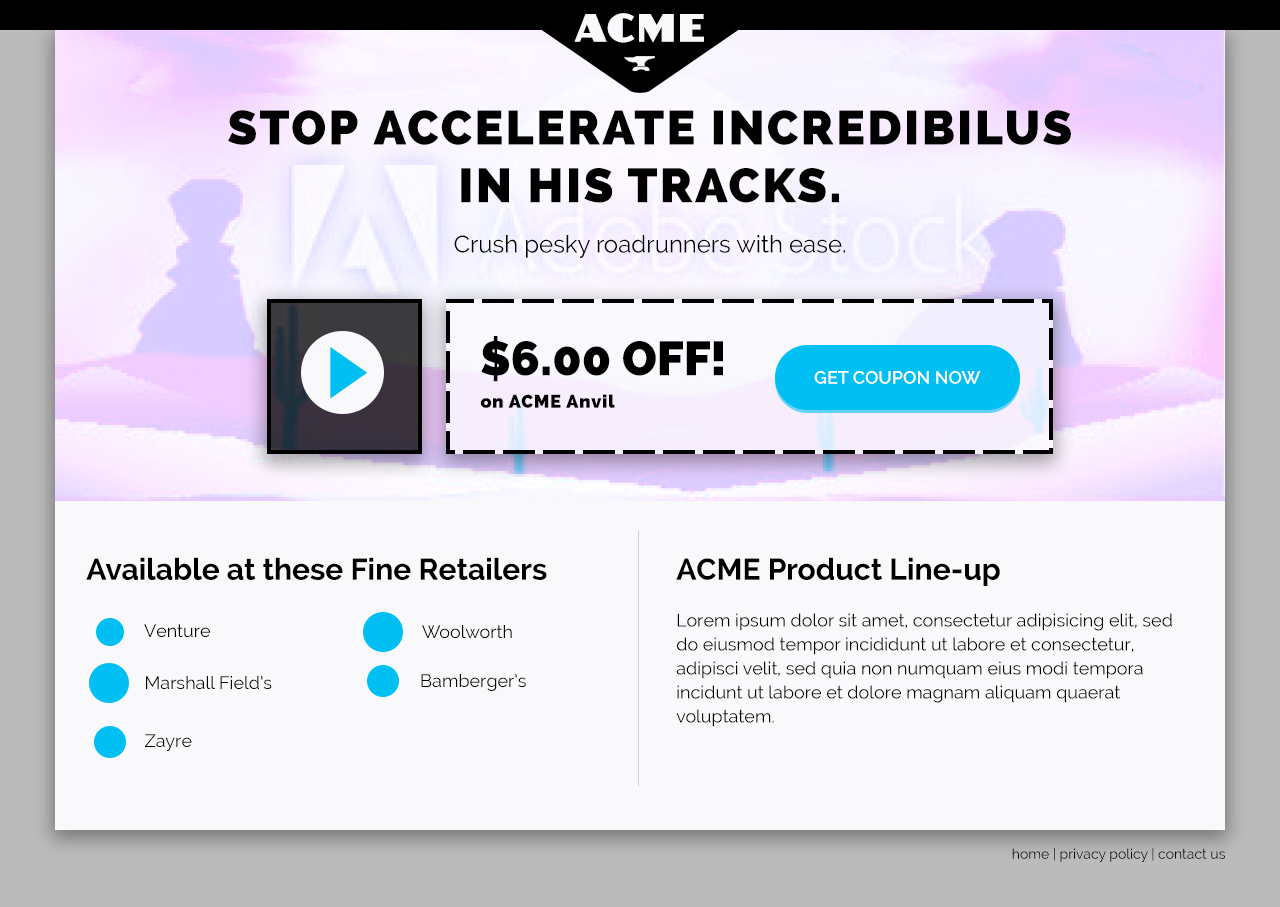
<style>
.page{position:relative;width:1280px;height:907px;background:#f9f9fc}
.page>*{position:absolute;margin:0}
.t1{font:37px "AnchorJack";letter-spacing:0.05em;color:#f9f9fc}
.t2{font:48px "Raleway-Heavy";letter-spacing:0.05em;color:#010101;text-transform:uppercase}
.t3{font:24px "Raleway";color:#000000}
.t4{font:48px "Raleway-Heavy";color:#000000}
.t5{font:18px "Raleway-SemiBold";color:#ffffff;text-transform:uppercase}
.t6{font:18px "Raleway-Heavy";letter-spacing:0.05em;color:#000000}
.t7{font:30px "Raleway-Bold";color:#000000}
.t8{font:18px/24px "Raleway";color:#000000}
.t9{font:18px "Raleway";color:#000000}
.t10{font:14px "Raleway";color:#010101}
</style>
<div class="page">
<p class="t1" style="left:574px;top:13px;width:130px;height:30px">ACME</p>
<p class="t2" style="left:228px;top:110px;width:843px;height:93px;text-align:center">Stop Accelerate Incredibilus in his Tracks.</p>
<p class="t3" style="left:454px;top:235px;width:391px;height:23px">Crush pesky roadrunners with ease.</p>
<p class="t4" style="left:481px;top:336px;width:242px;height:46px">$6.00 OFF!</p>
<p class="t5" style="left:814px;top:371px;width:167px;height:13px">Get coupon now</p>
<p class="t6" style="left:480px;top:394px;width:135px;height:14px">on ACME Anvil</p>
<p class="t7" style="left:86px;top:557px;width:461px;height:23px">Available at these Fine Retailers</p>
<p class="t7" style="left:676px;top:557px;width:324px;height:29px">ACME Product Line-up</p>
<p class="t8" style="left:676px;top:613px;width:496px;height:114px">Lorem ipsum dolor sit amet, consectetur adipisicing elit, sed do eiusmod tempor incididunt ut labore et consectetur, adipisci velit, sed quia non numquam eius modi tempora incidunt ut labore et dolore magnam aliquam quaerat voluptatem.</p>
<p class="t9" style="left:144px;top:624px;width:66px;height:14px">Venture</p>
<p class="t9" style="left:422px;top:625px;width:90px;height:14px">Woolworth</p>
<p class="t9" style="left:146px;top:676px;width:126px;height:14px">Marshall Field’s</p>
<p class="t9" style="left:421px;top:674px;width:105px;height:17px">Bamberger’s</p>
<p class="t9" style="left:145px;top:734px;width:47px;height:17px">Zayre</p>
<p class="t10" style="left:1012px;top:847px;width:213px;height:15px">home | privacy policy | contact us</p>
</div>
